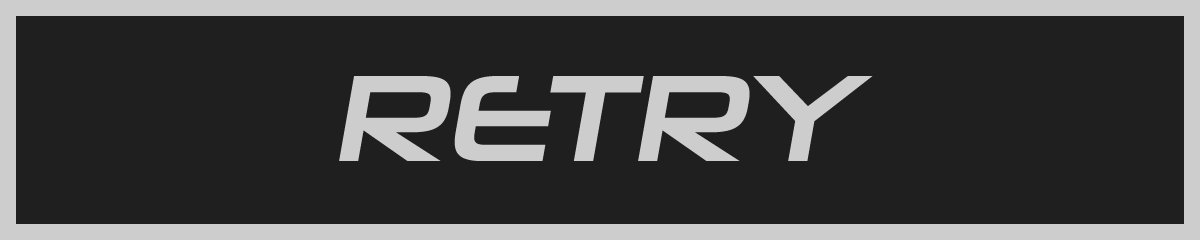
<style>
.page{position:relative;width:1200px;height:240px;background:#1f1f1f}
.page>*{position:absolute;margin:0}
.t1{font:124.5px "NeuropoliticalRg-Regular";color:#cdcdcd;font-style:italic}
</style>
<div class="page">
<p class="t1" style="left:339px;top:76px;width:534px;height:85px">RETRY</p>
</div>
